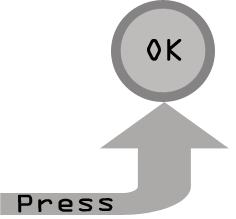
<style>
.page{position:relative;width:236px;height:219px;background:#ffffff}
.page>*{position:absolute;margin:0}
.t1{font:33.3px "OCRAExtended";color:#010101}
.t2{font:26.8px "OCRAExtended";color:#040404;scale:1.24 1}
</style>
<div class="page">
<p class="t1" style="left:147px;top:39px;width:35px;height:22px">OK</p>
<p class="t2" style="left:18px;top:194px;width:95px;height:19px;rotate:-1deg">Press</p>
</div>
